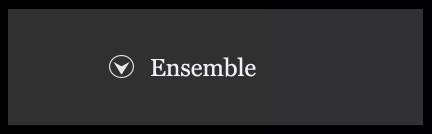
<style>
.page{position:relative;width:432px;height:134px;background:#313030}
.page>*{position:absolute;margin:0}
.t1{font:24.5px "Georgia";letter-spacing:-0.005em;color:#f0effb}
</style>
<div class="page">
<p class="t1" style="left:151px;top:57px;width:105px;height:20px">Ensemble</p>
</div>
